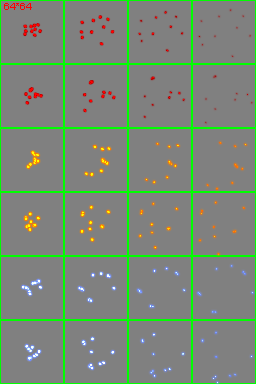
<style>
.page{position:relative;width:256px;height:384px;background:#808080}
.page>*{position:absolute;margin:0}
.t1{font:10px "ArialMT";color:#ff0000}
</style>
<div class="page">
<p class="t1" style="left:4px;top:3px;width:28px;height:7px">64*64</p>
</div>
